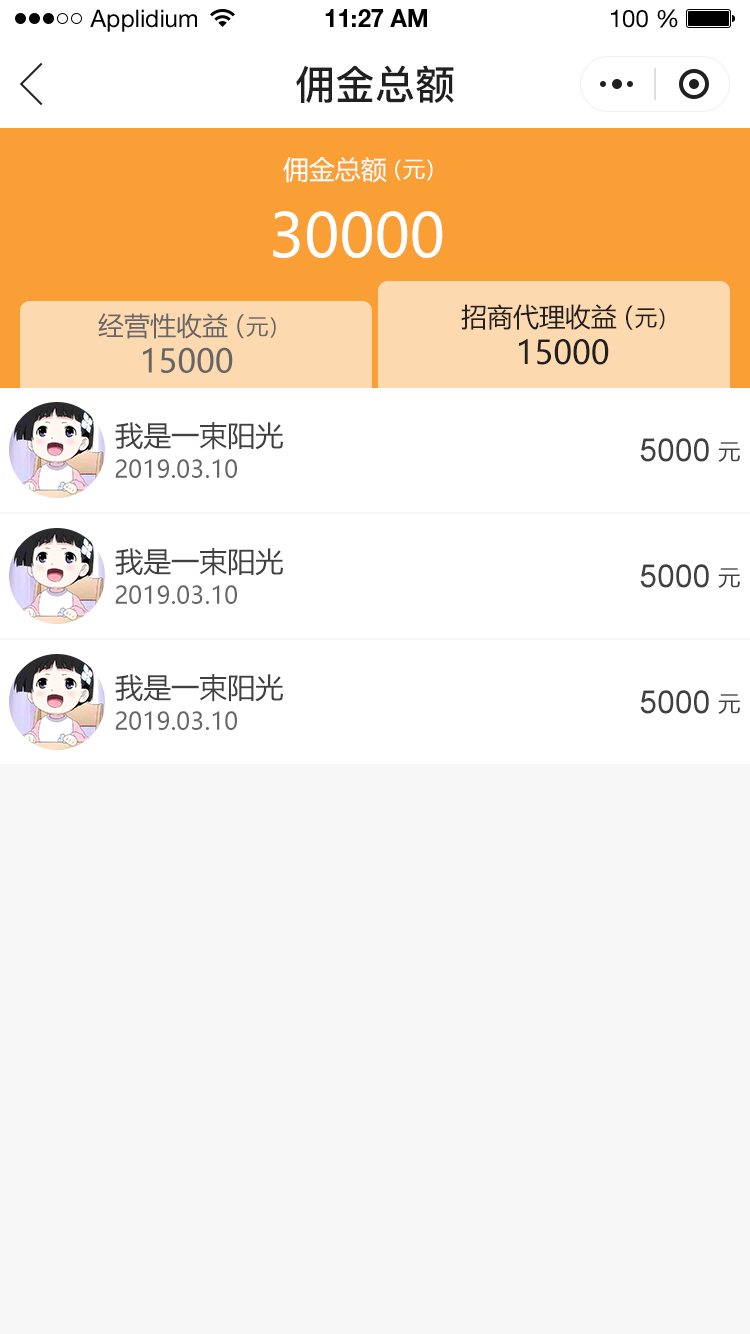
<style>
.page{position:relative;width:750px;height:1334px;background:#f7f7f7}
.page>*{position:absolute;margin:0}
.t1{font:24px "HelveticaNeueLTStd-Roman";color:#000000}
.t2{font:24px "HelveticaNeueLTStd-Bd";color:#000000}
.t3{font:40px "PingFang-SC-Bold";color:#202020;text-transform:uppercase}
.t4{font:26px "MicrosoftYaHei";color:#ffffff;text-transform:uppercase}
.t5{font:22px "MicrosoftYaHei";color:#ffffff;text-transform:uppercase}
.t6{font:60px "MicrosoftYaHei";color:#ffffff;text-transform:uppercase}
.t7{font:26.2px "MicrosoftYaHei";color:#202020;text-transform:uppercase}
.t8{font:22.2px "MicrosoftYaHei";color:#202020;text-transform:uppercase}
.t9{font:26px "MicrosoftYaHei";color:#666666;text-transform:uppercase}
.t10{font:22px "MicrosoftYaHei";color:#666666;text-transform:uppercase}
.t11{font:32.2px "MicrosoftYaHei";color:#202020;text-transform:uppercase}
.t12{font:32px "MicrosoftYaHei";color:#666666;text-transform:uppercase}
.t13{font:28px "MicrosoftYaHei";color:#404040;text-transform:uppercase}
.t14{font:32px "ArialMT";color:#404040;text-transform:uppercase}
.t15{font:22px "MicrosoftYaHei";color:#404040;text-transform:uppercase}
.t16{font:24px "MicrosoftYaHei";color:#666666;text-transform:uppercase}
</style>
<div class="page">
<p class="t1" style="left:90px;top:9px;width:107px;height:23px">Applidium</p>
<p class="t2" style="left:325px;top:9px;width:102px;height:18px">11:27 AM</p>
<p class="t1" style="left:611px;top:9px;width:67px;height:19px">100 %</p>
<p class="t3" style="left:296px;top:65px;width:158px;height:38px">佣金总额</p>
<p class="t4" style="left:283px;top:157px;width:104px;height:26px">佣金总额</p>
<p class="t5" style="left:395px;top:159px;width:38px;height:22px">（元）</p>
<p class="t6" style="left:273px;top:211px;width:170px;height:47px">30000</p>
<p class="t7" style="left:461px;top:304px;width:156px;height:26px">招商代理收益</p>
<p class="t8" style="left:626px;top:305px;width:39px;height:25px"><span class="t7">（</span>元）</p>
<p class="t9" style="left:98px;top:313px;width:130px;height:26px">经营性收益</p>
<p class="t10" style="left:237px;top:314px;width:39px;height:25px"><span class="t9">（</span>元）</p>
<p class="t11" style="left:519px;top:339px;width:90px;height:26px">15000</p>
<p class="t12" style="left:143px;top:347px;width:90px;height:26px">15000</p>
<p class="t13" style="left:115px;top:422px;width:168px;height:28px">我是一束阳光</p>
<p class="t14" style="left:640px;top:438px;width:69px;height:24px">5000</p>
<p class="t15" style="left:718px;top:442px;width:22px;height:20px">元</p>
<p class="t16" style="left:115px;top:459px;width:122px;height:19px">2019.03.10</p>
<p class="t13" style="left:115px;top:548px;width:168px;height:28px">我是一束阳光</p>
<p class="t14" style="left:640px;top:564px;width:69px;height:24px">5000</p>
<p class="t15" style="left:718px;top:568px;width:22px;height:20px">元</p>
<p class="t16" style="left:115px;top:585px;width:122px;height:19px">2019.03.10</p>
<p class="t13" style="left:115px;top:674px;width:168px;height:28px">我是一束阳光</p>
<p class="t14" style="left:640px;top:690px;width:69px;height:24px">5000</p>
<p class="t15" style="left:718px;top:694px;width:22px;height:20px">元</p>
<p class="t16" style="left:115px;top:711px;width:122px;height:19px">2019.03.10</p>
</div>
